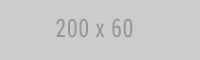
<style>
.page{position:relative;width:200px;height:60px;background:#cccccc}
.page>*{position:absolute;margin:0}
.t1{font:25px "Roboto-Condensed";letter-spacing:0.07em;color:#969696;scale:0.8 1}
</style>
<div class="page">
<p class="t1" style="left:56px;top:18px;width:77px;height:20px">200 x 60</p>
</div>
